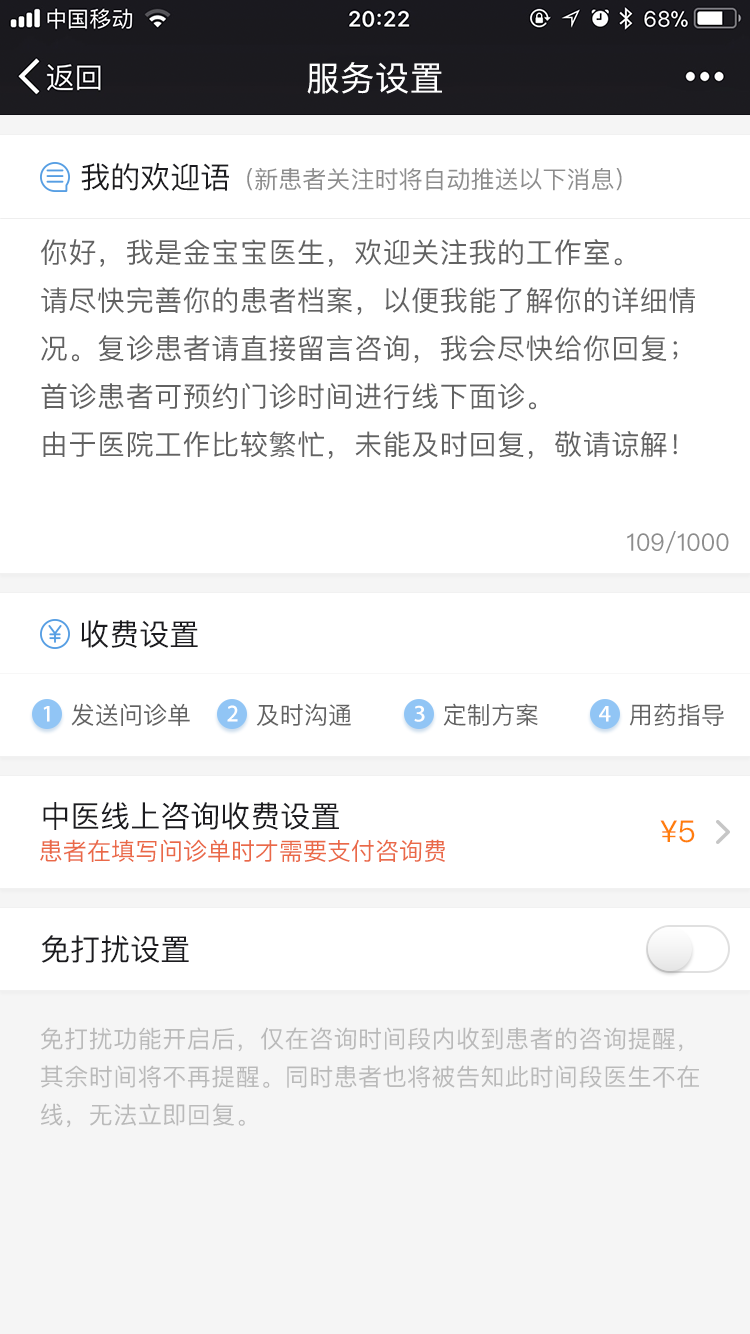
<style>
.page{position:relative;width:750px;height:1334px;background:#ffffff}
.page>*{position:absolute;margin:0}
.t1{font:34px "PingFangSC-Regular";letter-spacing:0.02em;color:#ffffff}
.t2{font:24px "PingFangSC-Regular";color:#8d8d8d}
.t3{font:30px "PingFangSC-Regular";color:#1b1b1f}
.t4{font:28px/48px "PingFangSC-Regular";letter-spacing:0.02em;color:#626262}
.t5{font:24px "PingHei-Semibold";color:#ffffff}
.t6{font:24px "PingFangSC-Regular";color:#626262}
.t7{font:30px "PingFangSC-Regular";color:#ff7e0c}
.t8{font:24px "PingFangSC-Regular";color:#ea6948}
.t9{font:24px/38px "PingFangSC-Regular";letter-spacing:0.02em;color:#bababa}
</style>
<div class="page">
<p class="t1" style="left:307px;top:62px;width:135px;height:32px">服务设置</p>
<p class="t2" style="left:81px;top:163px;width:541px;height:28px"><span class="t3">我的欢迎语</span>（新患者关注时将自动推送以下消息）</p>
<p class="t4" style="left:41px;top:239px;width:654px;height:220px">你好，我是金宝宝医生，欢迎关注我的工作室。 <br>请尽快完善你的患者档案，以便我能了解你的详细情况。复诊患者请直接留言咨询，我会尽快给你回复；首诊患者可预约门诊时间进行线下面诊。<br>由于医院工作比较繁忙，未能及时回复，敬请谅解！</p>
<p class="t2" style="left:627px;top:531px;width:102px;height:23px">109/1000</p>
<p class="t3" style="left:81px;top:620px;width:117px;height:28px">收费设置</p>
<p class="t5" style="left:43px;top:706px;width:7px;height:16px">1</p>
<p class="t6" style="left:71px;top:703px;width:119px;height:23px">发送问诊单</p>
<p class="t5" style="left:227px;top:705px;width:11px;height:17px">2</p>
<p class="t6" style="left:256px;top:703px;width:95px;height:23px">及时沟通</p>
<p class="t5" style="left:414px;top:705px;width:11px;height:17px">3</p>
<p class="t6" style="left:443px;top:703px;width:95px;height:23px">定制方案</p>
<p class="t5" style="left:599px;top:706px;width:12px;height:16px">4</p>
<p class="t6" style="left:629px;top:703px;width:95px;height:23px">用药指导</p>
<p class="t3" style="left:43px;top:802px;width:296px;height:28px">中医线上咨询收费设置</p>
<p class="t7" style="left:660px;top:820px;width:35px;height:23px">¥5</p>
<p class="t8" style="left:40px;top:839px;width:405px;height:23px">患者在填写问诊单时才需要支付咨询费</p>
<p class="t3" style="left:41px;top:935px;width:148px;height:28px">免打扰设置</p>
<p class="t9" style="left:41px;top:1027px;width:658px;height:101px">免打扰功能开启后，仅在咨询时间段内收到患者的咨询提醒，其余时间将不再提醒。同时患者也将被告知此时间段医生不在线，无法立即回复。</p>
</div>
